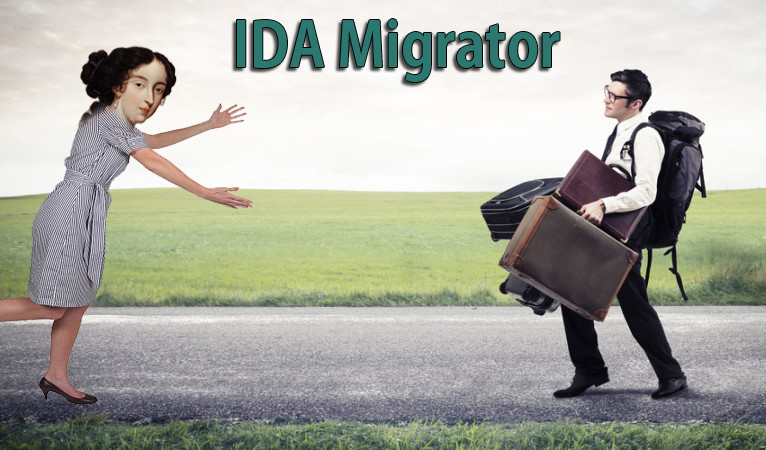
<style>
.page{position:relative;width:766px;height:450px}
.page>*{position:absolute;margin:0}
.t1{font:60.9px "AdobeGothicStd-Bold";color:#2c7770;scale:0.9 1}
</style>
<div class="page">
<p class="t1" style="left:237px;top:19px;width:323px;height:63px">IDA Migrator</p>
</div>
